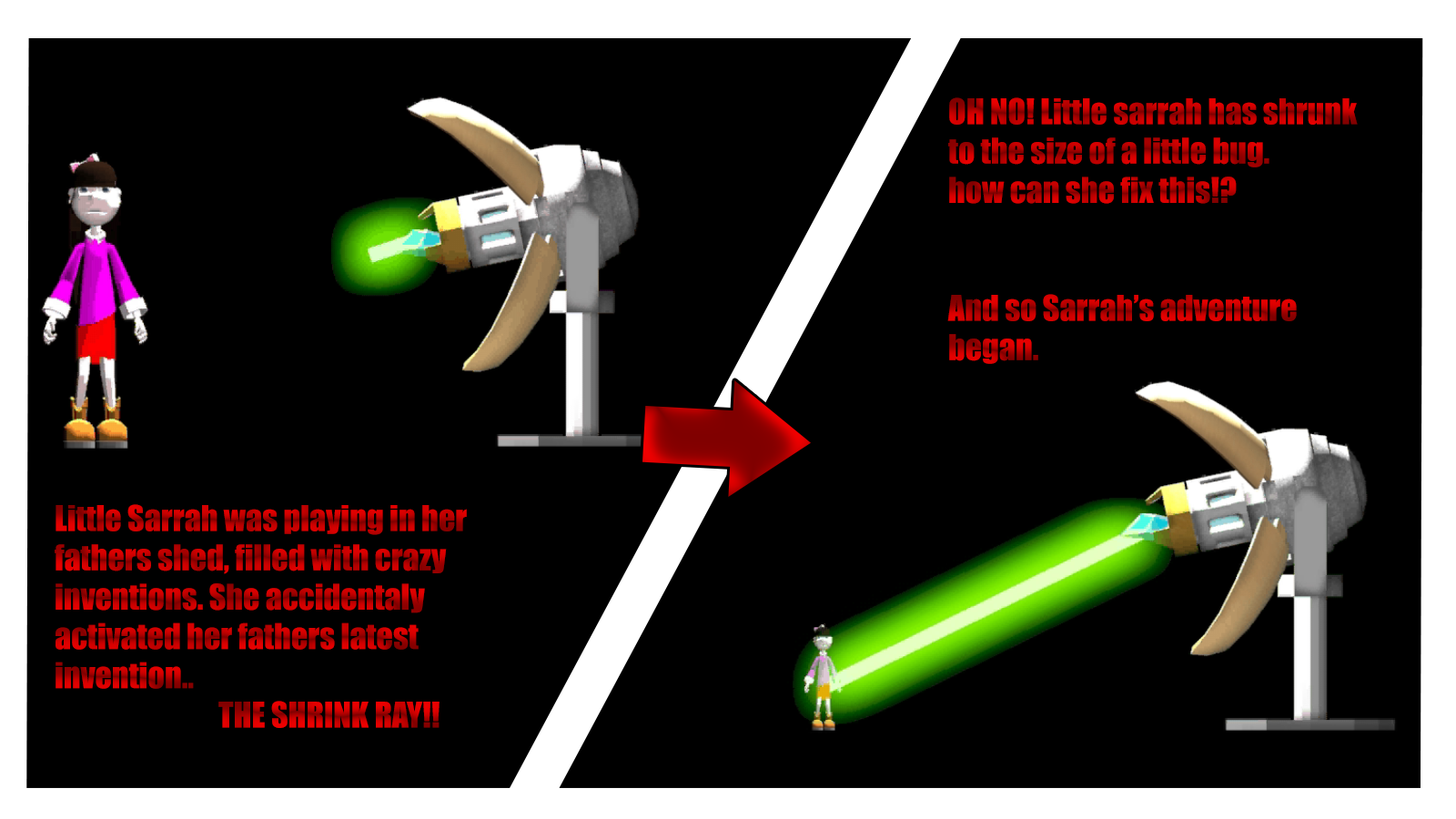
<style>
.page{position:relative;width:1456px;height:819px;background:#000000}
.page>*{position:absolute;margin:0}
.t1{font:32.8px "Impact"}
</style>
<div class="page">
<p class="t1" style="left:947px;top:97px;width:411px;height:267px">OH NO! Little sarrah has shrunk to the size of a little bug.<br>how can she fix this!?<br><br><br>And so Sarrah’s adventure began.</p>
<p class="t1" style="left:55px;top:504px;width:412px;height:224px">Little Sarrah was playing in her fathers shed, filled with crazy inventions. She accidentaly activated her fathers latest invention..<br>     THE SHRINK RAY!!</p>
</div>
